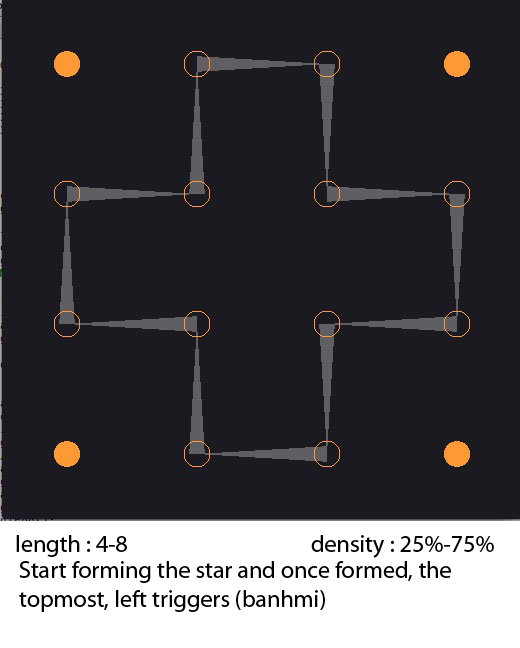
<style>
.page{position:relative;width:520px;height:648px;background:#1b1a20}
.page>*{position:absolute;margin:0}
.t1{font:24px "MyriadPro-Regular";color:#000000}
</style>
<div class="page">
<p class="t1" style="left:16px;top:535px;width:478px;height:23px">length : 4-8                                    density : 25%-75%</p>
<p class="t1" style="left:19px;top:561px;width:432px;height:51px">Start forming the star and once formed, the <br>topmost, left triggers (banhmi)</p>
</div>
